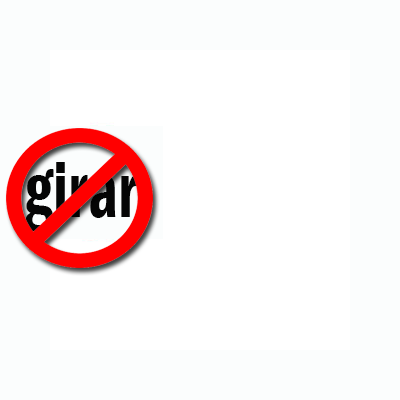
<style>
.page{position:relative;width:400px;height:400px;background:#ffffff}
.page>*{position:absolute;margin:0}
.t1{font:83.3px "FranklinGothic-DemiCond";color:#050505;scale:0.76 1}
</style>
<div class="page">
<p class="t1" style="left:25px;top:162px;width:113px;height:70px">girar</p>
</div>
